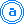
<style>
.page{position:relative;width:24px;height:24px;background:#ffffff}
.page>*{position:absolute;margin:0}
.t1{font:10px "Dogica_Pixel";letter-spacing:-0.02em;color:#007eff;font-weight:bold}
</style>
<div class="page">
<p class="t1" style="left:9px;top:8px;width:7px;height:8px">a</p>
</div>
